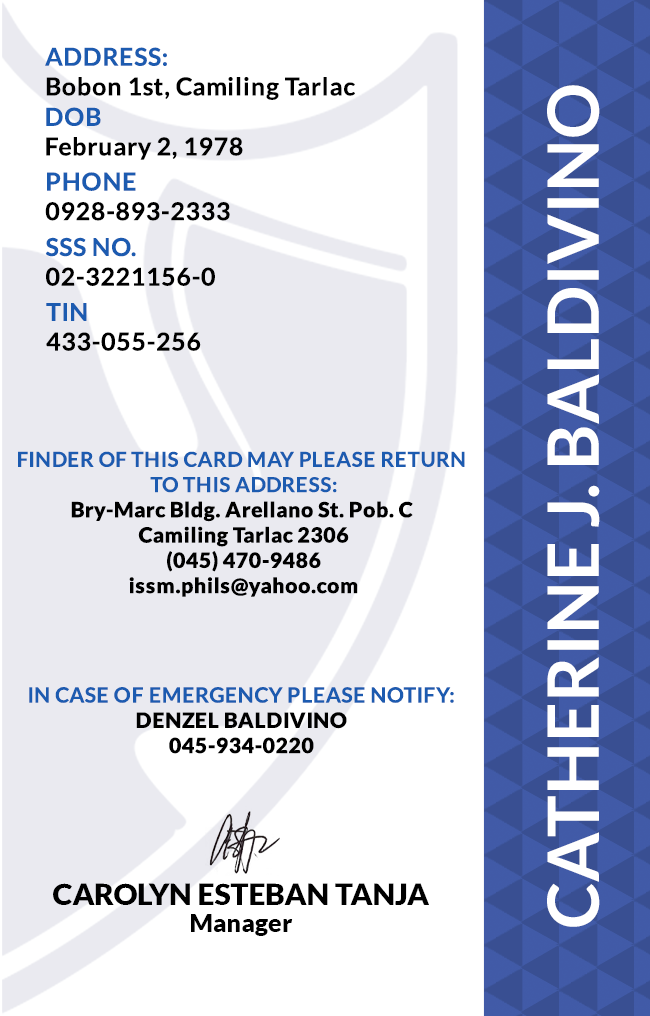
<style>
.page{position:relative;width:650px;height:1016px;background:#ffffff}
.page>*{position:absolute;margin:0}
.t1{font:24.7px/29.6px "Lato-Bold";letter-spacing:0.025em;color:#000000}
.t2{font:24.7px/29.6px "Lato-Bold";letter-spacing:0.025em;color:#1c5bb0}
.t3{font:70.8px "Lato-Bold";color:#ffffff}
.t4{font:21.1px "Lato-Black";letter-spacing:0.025em}
.t5{font:20.5px/25.3px "Lato-Bold";letter-spacing:0.025em;text-transform:uppercase}
.t6{font:21.1px/25.3px "Lato-Bold";letter-spacing:0.025em;color:#1c5bb0}
.t7{font:21.1px "Lato-Black";letter-spacing:0.025em;color:#000000}
.t8{font:29.5px "Lato-Black";color:#000000}
.t9{font:25px "Lato-Black";color:#000000}
</style>
<div class="page">
<p class="t1" style="left:45px;top:47px;width:310px;height:53px"><span class="t2">ADDRESS:<br></span>Bobon 1st, Camiling Tarlac</p>
<p class="t3" style="left:547px;top:85px;width:53px;height:842px;rotate:-90deg">CATHERINE J. BALDIVINO</p>
<p class="t1" style="left:46px;top:107px;width:197px;height:53px"><span class="t2">DOB<br></span>February 2, 1978</p>
<p class="t1" style="left:45px;top:172px;width:185px;height:49px"><span class="t2">PHONE <br></span>0928-893-2333</p>
<p class="t1" style="left:45px;top:237px;width:170px;height:49px"><span class="t2">SSS NO.<br></span>02-3221156-0</p>
<p class="t1" style="left:46px;top:303px;width:155px;height:48px"><span class="t2">TIN<br></span>433-055-256</p>
<p class="t4" style="left:18px;top:451px;width:447px;height:146px;text-align:center"><span class="t5">Finder of this card may please return <br>to this address:<br></span>Bry-Marc Bldg. Arellano St. Pob. C <br>Camiling Tarlac 2306<br>(045) 470-9486<br>issm.phils@yahoo.com</p>
<p class="t6" style="left:29px;top:687px;width:425px;height:67px;text-align:center">IN CASE OF EMERGENCY PLEASE NOTIFY:<br><span class="t7">DENZEL BALDIVINO<br>045-934-0220</span></p>
<p class="t8" style="left:53px;top:883px;width:376px;height:22px">CAROLYN ESTEBAN TANJA</p>
<p class="t9" style="left:191px;top:914px;width:102px;height:22px">Manager</p>
</div>
